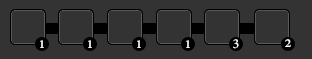
<style>
.page{position:relative;width:312px;height:59px;background:#333333}
.page>*{position:absolute;margin:0}
.t1{font:15px "AdobeDevanagari-Bold";color:#ffffff}
</style>
<div class="page">
<p class="t1" style="left:40px;top:40px;width:4px;height:8px">1</p>
<p class="t1" style="left:88px;top:40px;width:4px;height:8px">1</p>
<p class="t1" style="left:137px;top:40px;width:4px;height:8px">1</p>
<p class="t1" style="left:186px;top:40px;width:4px;height:8px">1</p>
<p class="t1" style="left:233px;top:39px;width:6px;height:10px">3</p>
<p class="t1" style="left:285px;top:39px;width:6px;height:8px">2</p>
</div>
